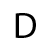
<style>
.page{position:relative;width:50px;height:50px;background:#ffffff}
.page>*{position:absolute;margin:0}
.t1{font:36px "MyriadPro-Regular";color:#000000}
</style>
<div class="page">
<p class="t1" style="left:15px;top:13px;width:21px;height:25px">D</p>
</div>
